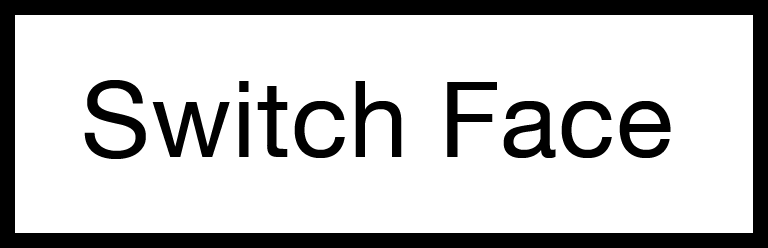
<style>
.page{position:relative;width:768px;height:248px;background:#ffffff}
.page>*{position:absolute;margin:0}
.t1{font:105.6px "HelveticaNeue";letter-spacing:0.01em;color:#000000}
</style>
<div class="page">
<p class="t1" style="left:84px;top:80px;width:587px;height:79px">Switch Face</p>
</div>
